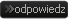
<style>
.page{position:relative;width:68px;height:20px}
.page>*{position:absolute;margin:0}
.t1{font:11px "Tahoma";color:#ababab}
</style>
<div class="page">
<p class="t1" style="left:15px;top:4px;width:50px;height:11px">odpowiedz</p>
</div>
